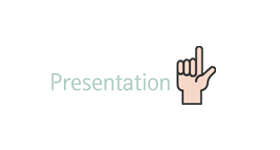
<style>
.page{position:relative;width:280px;height:150px;background:#ffffff}
.page>*{position:absolute;margin:0}
.t1{font:24px "SeN-CM";color:#acccc4}
</style>
<div class="page">
<p class="t1" style="left:51px;top:73px;width:119px;height:18px">Presentation</p>
</div>
